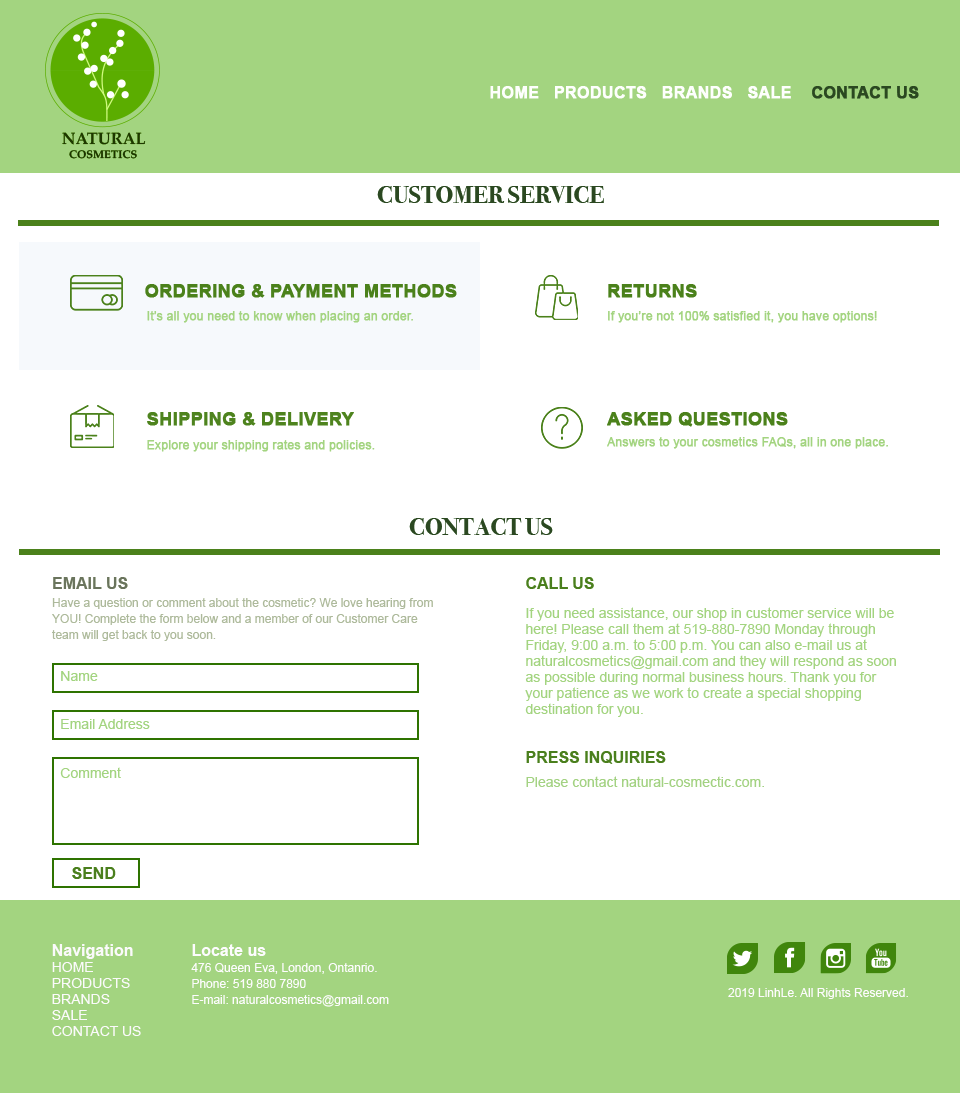
<style>
.page{position:relative;width:960px;height:1093px;background:#ffffff}
.page>*{position:absolute;margin:0}
.t1{font:16px "Arial-BoldMT";color:#fcfdfb;text-transform:uppercase;font-weight:bold}
.t2{font:16px "Arial-BoldMT";color:#3d4c37;text-transform:uppercase;font-weight:bold}
.t3{font:25px "BodoniSvtyTwoITCTT-Bold";color:#3d4c37;text-transform:uppercase}
.t4{font:18px "Arial-BoldMT";color:#4b811b;text-transform:uppercase;font-weight:bold}
.t5{font:12px "ArialMT";color:#a3d480;font-weight:bold}
.t6{font:18px "Arial-BoldMT";color:#4e831e;text-transform:uppercase;font-weight:bold}
.t7{font:12px/16px "ArialMT";color:#a9b991}
.t8{font:16px/18px "Arial-BoldMT";color:#5f7441}
.t9{font:12px/18px "ArialMT";color:#a9b991}
.t10{font:16px "Arial-BoldMT";color:#4a7f1d}
.t11{font:14px/16px "ArialMT";color:#a3d480}
.t12{font:14px "ArialMT";color:#a3d480}
.t13{font:14px "ArialMT";color:#a3d282}
.t14{font:14px/16px "ArialMT";color:#fbf9f9;text-transform:uppercase}
.t15{font:16px/16px "Arial-BoldMT";color:#fbf9f9}
.t16{font:12px/16px "ArialMT";color:#fcfafa}
.t17{font:16px/16px "Arial-BoldMT";color:#fcfafa}
.t18{font:12px "ArialMT";color:#fdfbfd}
</style>
<div class="page">
<p class="t1" style="left:490px;top:86px;width:429px;height:13px">HOME   PRODUCTS   brands   SALE    <span class="t2">Contact us</span></p>
<p class="t3" style="left:377px;top:186px;width:227px;height:17px">Customer Service</p>
<p class="t4" style="left:145px;top:284px;width:312px;height:14px">Ordering &amp; Payment methods</p>
<p class="t4" style="left:608px;top:284px;width:89px;height:14px">returns</p>
<p class="t5" style="left:147px;top:311px;width:266px;height:12px">It’s all you need to know when placing an order.</p>
<p class="t5" style="left:608px;top:311px;width:269px;height:12px">If you’re not 100% satisfied it, you have options!</p>
<p class="t6" style="left:147px;top:412px;width:207px;height:14px">shipping &amp; delivery</p>
<p class="t4" style="left:607px;top:412px;width:181px;height:15px">asked questions</p>
<p class="t5" style="left:607px;top:437px;width:281px;height:12px">Answers to your cosmetics FAQs, all in one place.</p>
<p class="t5" style="left:147px;top:440px;width:228px;height:12px">Explore your shipping rates and policies.</p>
<p class="t3" style="left:409px;top:518px;width:144px;height:17px">Contact us</p>
<p class="t7" style="left:52px;top:577px;width:381px;height:64px"><span class="t8">EMAIL US<br></span><span class="t9">Have a question or comment about the cosmetic? We love hearing from</span> YOU! Complete the form below and a member of our Customer Care team will get back to you soon.</p>
<p class="t10" style="left:526px;top:577px;width:68px;height:12px">CALL US</p>
<p class="t11" style="left:525px;top:607px;width:371px;height:110px">If you need assistance, our shop in customer service will be here! Please call them at 519-880-7890 Monday through Friday, 9:00 a.m. to 5:00 p.m. You can also e-mail us at naturalcosmetics@gmail.com and they will respond as soon as possible during normal business hours. Thank you for your patience as we work to create a special shopping destination for you.</p>
<p class="t12" style="left:61px;top:671px;width:37px;height:10px">Name</p>
<p class="t12" style="left:61px;top:719px;width:89px;height:10px">Email Address</p>
<p class="t10" style="left:526px;top:751px;width:140px;height:13px">PRESS INQUIRIES</p>
<p class="t12" style="left:60px;top:767px;width:61px;height:11px">Comment</p>
<p class="t13" style="left:526px;top:776px;width:238px;height:11px">Please contact natural-cosmectic.com.</p>
<p class="t10" style="left:72px;top:867px;width:44px;height:12px">SEND</p>
<p class="t14" style="left:52px;top:944px;width:89px;height:92px"><span class="t15">Navigation<br></span>Home<br>Products<br>Brands<br>Sale<br>Contact us</p>
<p class="t16" style="left:191px;top:944px;width:198px;height:63px"><span class="t17">Locate us<br></span>476 Queen Eva, London, Ontanrio.<br>Phone: 519 880 7890<br>E-mail: naturalcosmetics@gmail.com</p>
<p class="t18" style="left:728px;top:988px;width:180px;height:11px">2019 LinhLe. All Rights Reserved.</p>
</div>
